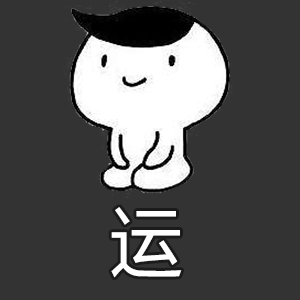
<style>
.page{position:relative;width:300px;height:300px;background:#333333}
.page>*{position:absolute;margin:0}
.t1{font:75.6px "MicrosoftYaHei";color:#ffffff;scale:0.95 1}
</style>
<div class="page">
<p class="t1" style="left:111px;top:207px;width:71px;height:71px">运</p>
</div>
